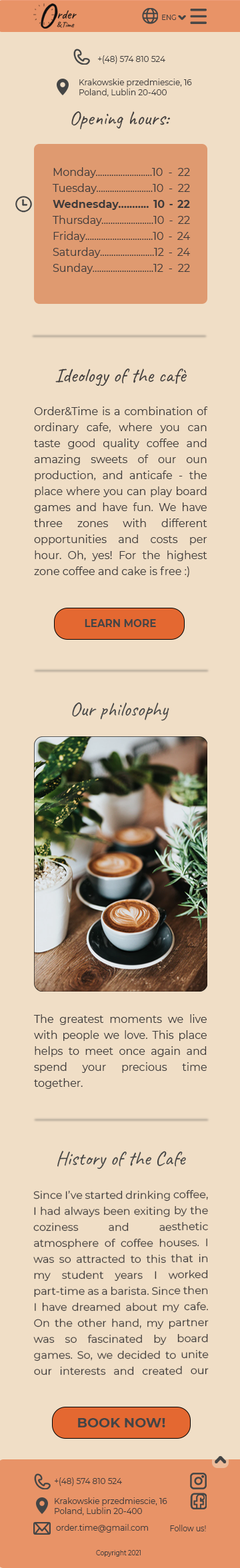
<style>
.page{position:relative;width:240px;height:1568px;background:#f0dec6}
.page>*{position:absolute;margin:0}
.t1{font:6.7px "Montserrat-Regular";color:#3e3b3b}
.t2{font:8px "Montserrat-Regular";color:#3e3b3b}
.t3{font:20px "Caveat-Regular";color:#3e3b3b}
.t4{font:10.7px/16px "Montserrat-Regular";color:#3e3b3b}
.t5{font:10.7px/16px "Montserrat-Bold";color:#3e3b3b}
.t6{font:10.8px "Montserrat-Bold";color:#444545;scale:0.94 1}
.t7{font:20px "Caveat-Regular";color:#444545}
.t8{font:13.5px "Montserrat-Bold";color:#444545}
.t9{font:8px "Montserrat-Regular";color:#3e3b3b;scale:0.92 1}
.t10{font:6.7px "Montserrat-Regular";color:#3e3b3b;scale:0.92 1}
</style>
<div class="page">
<p class="t1" style="left:162px;top:15px;width:14px;height:5px">ENG</p>
<p class="t2" style="left:98px;top:55px;width:67px;height:9px">+(48) 574 810 524</p>
<p class="t2" style="left:79px;top:79px;width:113px;height:18px;text-align:justify">Krakowskie przedmiescie, 16<br>Poland, Lublin 20-400</p>
<p class="t3" style="left:71px;top:111px;width:99px;height:18px">Opening hours:</p>
<p class="t4" style="left:52px;top:167px;width:138px;height:107px;text-align:justify">Monday.........................10 - 22<br>Tuesday.........................10 - 22<br><span class="t5">Wednesday........... 10 - 22<br></span>Thursday.......................10 - 22<br>Friday..............................10 - 24<br>Saturday........................12 - 24<br>Sunday...........................12 - 22</p>
<p class="t3" style="left:55px;top:369px;width:132px;height:18px">Ideology of the cafè</p>
<p class="t4" style="left:34px;top:406px;width:174px;height:171px;text-align:justify">Order&amp;Time is a combination of ordinary cafe, where you can taste good quality coffee and amazing sweets of our oun production, and anticafe - the place where you can play board games and have fun. We have three zones with different opportunities and costs per hour. Oh, yes! For the highest zone coffee and cake is free :)</p>
<p class="t6" style="left:85px;top:619px;width:71px;height:8px">LEARN MORE</p>
<p class="t7" style="left:72px;top:702px;width:97px;height:19px">Our philosophy</p>
<p class="t4" style="left:33px;top:1014px;width:174px;height:75px;text-align:justify">The greatest moments we live with people we love. This place helps to meet once again and spend your precious time together.</p>
<p class="t7" style="left:57px;top:1151px;width:129px;height:19px">History of the Cafe</p>
<p class="t4" style="left:33px;top:1189px;width:176px;height:186px;text-align:justify">Since I’ve started drinking coffee, I had always been exiting by the coziness and aesthetic atmosphere of coffee houses. I was so attracted to this that in my student years I worked part-time as a barista. Since then I have dreamed about my cafe. On the other hand, my partner was so fascinated by board games. So, we decided to unite our interests and created our company.</p>
<p class="t8" style="left:78px;top:1418px;width:87px;height:9px">BOOK NOW!</p>
<p class="t2" style="left:55px;top:1477px;width:67px;height:9px">+(48) 574 810 524</p>
<p class="t2" style="left:55px;top:1497px;width:112px;height:18px;text-align:justify">Krakowskie przedmiescie, 16<br>Poland, Lublin 20-400</p>
<p class="t2" style="left:56px;top:1524px;width:92px;height:9px">order.time@gmail.com</p>
<p class="t9" style="left:170px;top:1525px;width:36px;height:6px">Follow us!</p>
<p class="t10" style="left:96px;top:1550px;width:45px;height:7px">Copyright 2021</p>
</div>
